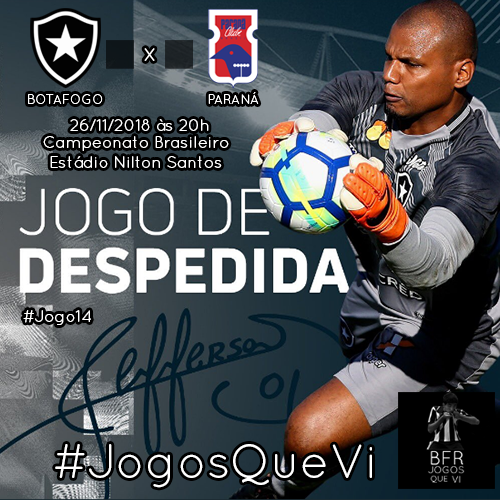
<style>
.page{position:relative;width:500px;height:500px}
.page>*{position:absolute;margin:0}
.t1{font:25.7px "QuicksandBook-Regular";color:#ffffff}
.t2{font:13.4px "QuicksandBook-Regular";color:#ffffff}
.t3{font:16.5px "QuicksandBook-Regular";color:#ffffff}
.t4{font:48px "QuicksandBook-Regular";color:#ffffff}
</style>
<div class="page">
<p class="t1" style="left:144px;top:48px;width:11px;height:13px">x</p>
<p class="t2" style="left:28px;top:94px;width:75px;height:10px">BOTAFOGO</p>
<p class="t2" style="left:208px;top:92px;width:51px;height:12px">PARANÁ</p>
<p class="t3" style="left:70px;top:119px;width:139px;height:12px">26/11/2018 às 20h</p>
<p class="t3" style="left:43px;top:136px;width:186px;height:15px">Campeonato Brasileiro</p>
<p class="t3" style="left:50px;top:156px;width:172px;height:12px">Estádio Nilton Santos</p>
<p class="t3" style="left:23px;top:310px;width:68px;height:15px">#Jogo14</p>
<p class="t4" style="left:55px;top:444px;width:317px;height:44px">#JogosQueVi</p>
</div>
